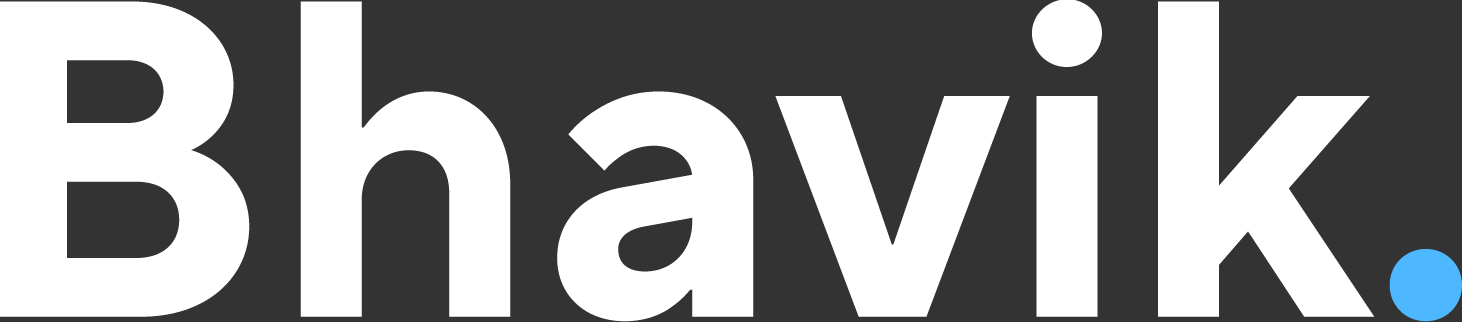
<style>
.page{position:relative;width:1462px;height:322px;background:#333333}
.page>*{position:absolute;margin:0}
.t1{font:450px "TTNormsPro-Bold";color:#ffffff}
.t2{font:450px "TTNormsPro-Bold";color:#4db8ff}
</style>
<div class="page">
<p class="t1" style="left:0px;top:0px;width:1462px;height:322px">Bhavik<span class="t2">.</span></p>
</div>
